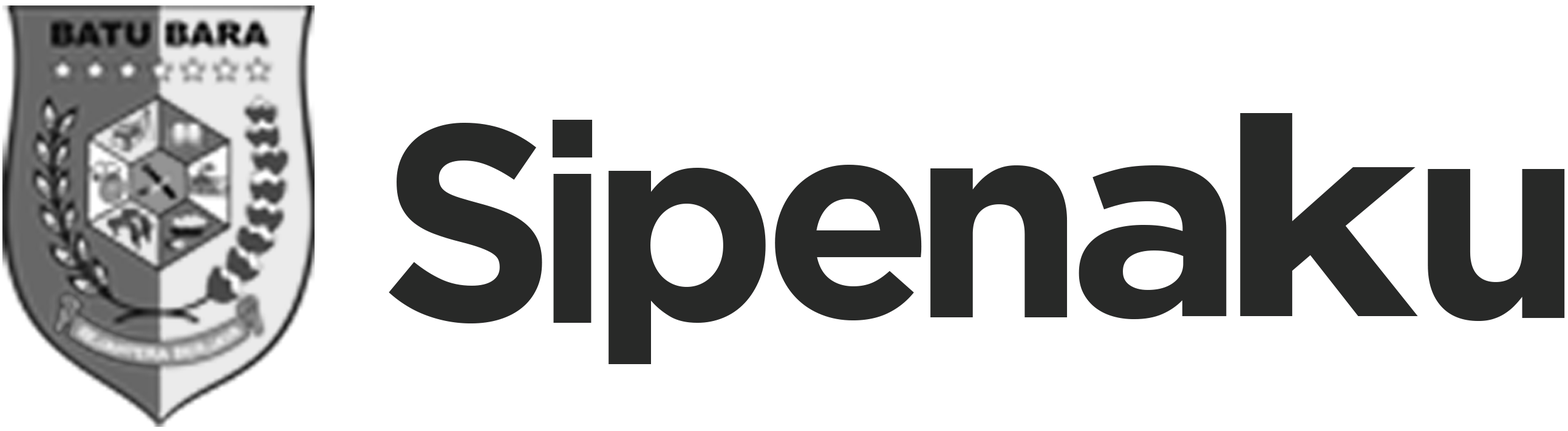
<style>
.page{position:relative;width:1568px;height:431px;background:#ffffff}
.page>*{position:absolute;margin:0}
.t1{font:278.4px "Gotham-Bold";color:#282928;scale:1.23 1}
.t2{font:278.4px "Gotham-Bold";color:#282928}
.t3{font:278.4px "Gotham-Bold";color:#282928;scale:0.89 1}
.t4{font:278.4px "Gotham-Bold";color:#282928;scale:1.07 1}
</style>
<div class="page">
<p class="t1" style="left:1240px;top:113px;width:178px;height:203px">k</p>
<p class="t2" style="left:389px;top:123px;width:153px;height:200px">S</p>
<p class="t3" style="left:552px;top:120px;width:41px;height:202px">i</p>
<p class="t2" style="left:608px;top:168px;width:158px;height:196px">p</p>
<p class="t2" style="left:775px;top:165px;width:147px;height:155px">e</p>
<p class="t2" style="left:930px;top:165px;width:138px;height:152px">n</p>
<p class="t4" style="left:1079px;top:165px;width:148px;height:154px">a</p>
<p class="t2" style="left:1428px;top:169px;width:137px;height:152px">u</p>
</div>
